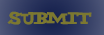
<style>
.page{position:relative;width:104px;height:35px}
.page>*{position:absolute;margin:0}
.t1{font:18.7px "VNI-Yahoo";letter-spacing:-0.05em;color:#7c7830}
</style>
<div class="page">
<p class="t1" style="left:7px;top:11px;width:85px;height:14px">submit</p>
</div>
